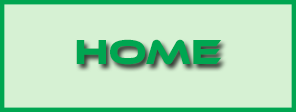
<style>
.page{position:relative;width:296px;height:112px;background:#d6f1d3}
.page>*{position:absolute;margin:0}
.t1{font:36px "EthnocentricRg-Regular";color:#00a651}
</style>
<div class="page">
<p class="t1" style="left:76px;top:39px;width:146px;height:26px">home</p>
</div>
